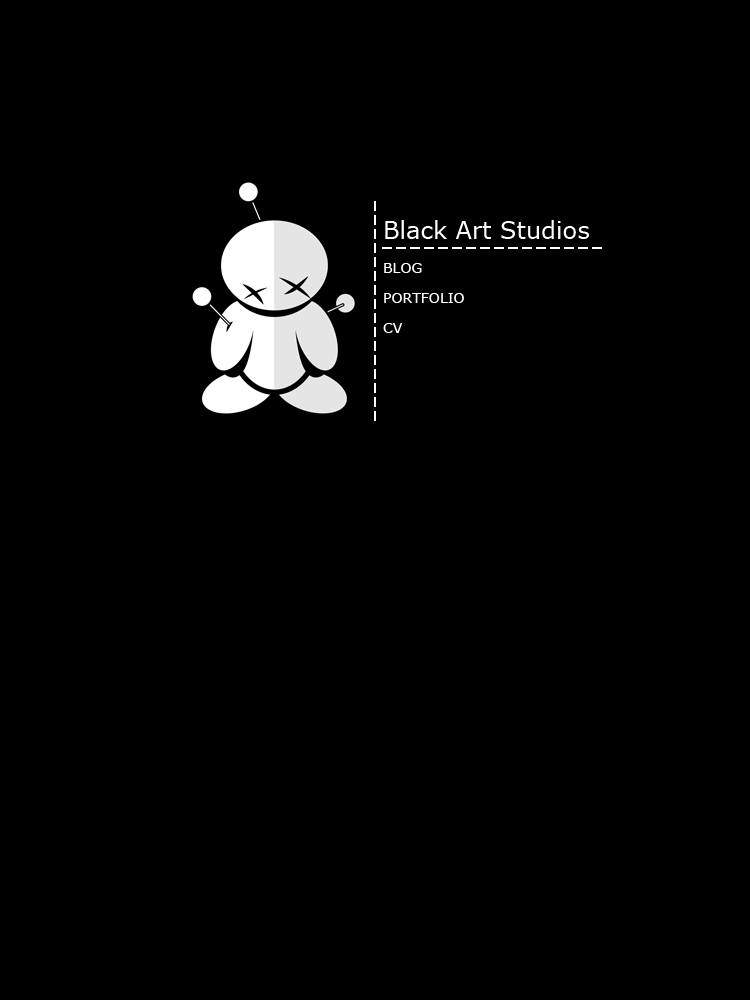
<style>
.page{position:relative;width:750px;height:1000px;background:#000000}
.page>*{position:absolute;margin:0}
.t1{font:24px "Verdana";color:#ffffff}
.t2{font:14px "Verdana";color:#ffffff}
</style>
<div class="page">
<p class="t1" style="left:385px;top:220px;width:204px;height:19px">Black Art Studios</p>
<p class="t2" style="left:384px;top:263px;width:38px;height:10px">BLOG</p>
<p class="t2" style="left:384px;top:293px;width:80px;height:10px">PORTFOLIO</p>
<p class="t2" style="left:383px;top:323px;width:20px;height:10px">CV</p>
</div>
